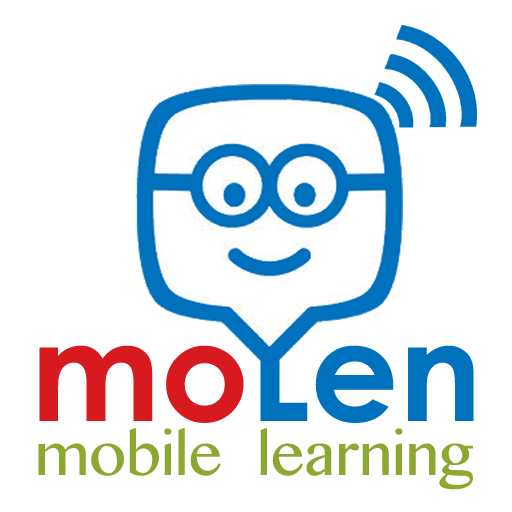
<style>
.page{position:relative;width:512px;height:512px;background:#ffffff}
.page>*{position:absolute;margin:0}
.t1{font:137.9px "CenturyGothic-Bold";color:#0071bc}
.t2{font:137.9px "CenturyGothic-Bold";color:#d71920}
.t3{font:58.7px "TamilMN";color:#8da831}
</style>
<div class="page">
<p class="t1" style="left:39px;top:321px;width:435px;height:102px"><span class="t2">mo</span>Len</p>
<p class="t3" style="left:38px;top:428px;width:435px;height:62px">mobile  learning</p>
</div>
